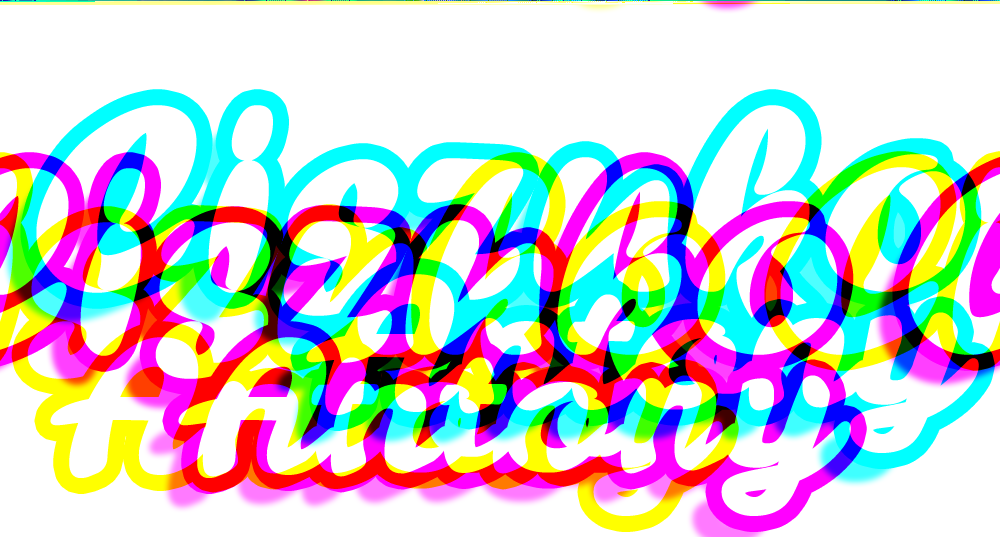
<style>
.page{position:relative;width:1000px;height:537px;background:#ffffff}
.page>*{position:absolute;margin:0}
.t1{font:269.1px "ForteMT";font-weight:bold}
.t2{font:174.2px "LeckerliOne-Regular";font-weight:bold;scale:1.13 1}
</style>
<div class="page">
<p class="t1" style="left:36px;top:104px;width:930px;height:234px">Ciszuko</p>
<p class="t2" style="left:306px;top:273px;width:673px;height:179px;rotate:-1deg">Antony</p>
</div>
